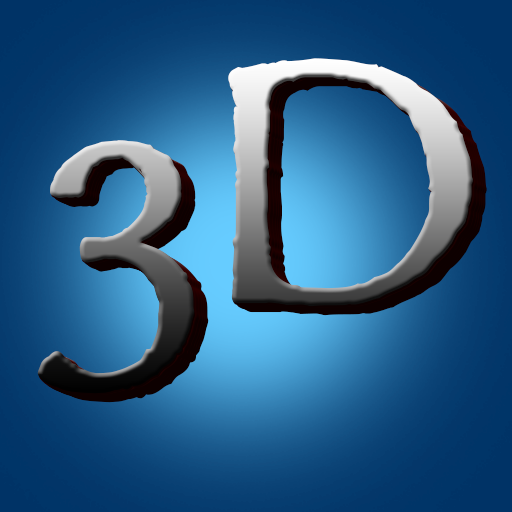
<style>
.page{position:relative;width:512px;height:512px}
.page>*{position:absolute;margin:0}
.t1{font:391.7px "Mordred-Bold"}
</style>
<div class="page">
<p class="t1" style="left:37px;top:58px;width:436px;height:336px">3D</p>
<p class="t1" style="left:38px;top:60px;width:436px;height:336px">3D</p>
<p class="t1" style="left:38px;top:59px;width:436px;height:336px">3D</p>
<p class="t1" style="left:41px;top:62px;width:436px;height:336px">3D</p>
<p class="t1" style="left:42px;top:63px;width:436px;height:336px">3D</p>
<p class="t1" style="left:44px;top:64px;width:436px;height:336px">3D</p>
<p class="t1" style="left:45px;top:64px;width:436px;height:336px">3D</p>
<p class="t1" style="left:47px;top:65px;width:436px;height:336px">3D</p>
<p class="t1" style="left:49px;top:66px;width:436px;height:336px">3D</p>
<p class="t1" style="left:51px;top:67px;width:436px;height:336px">3D</p>
</div>
